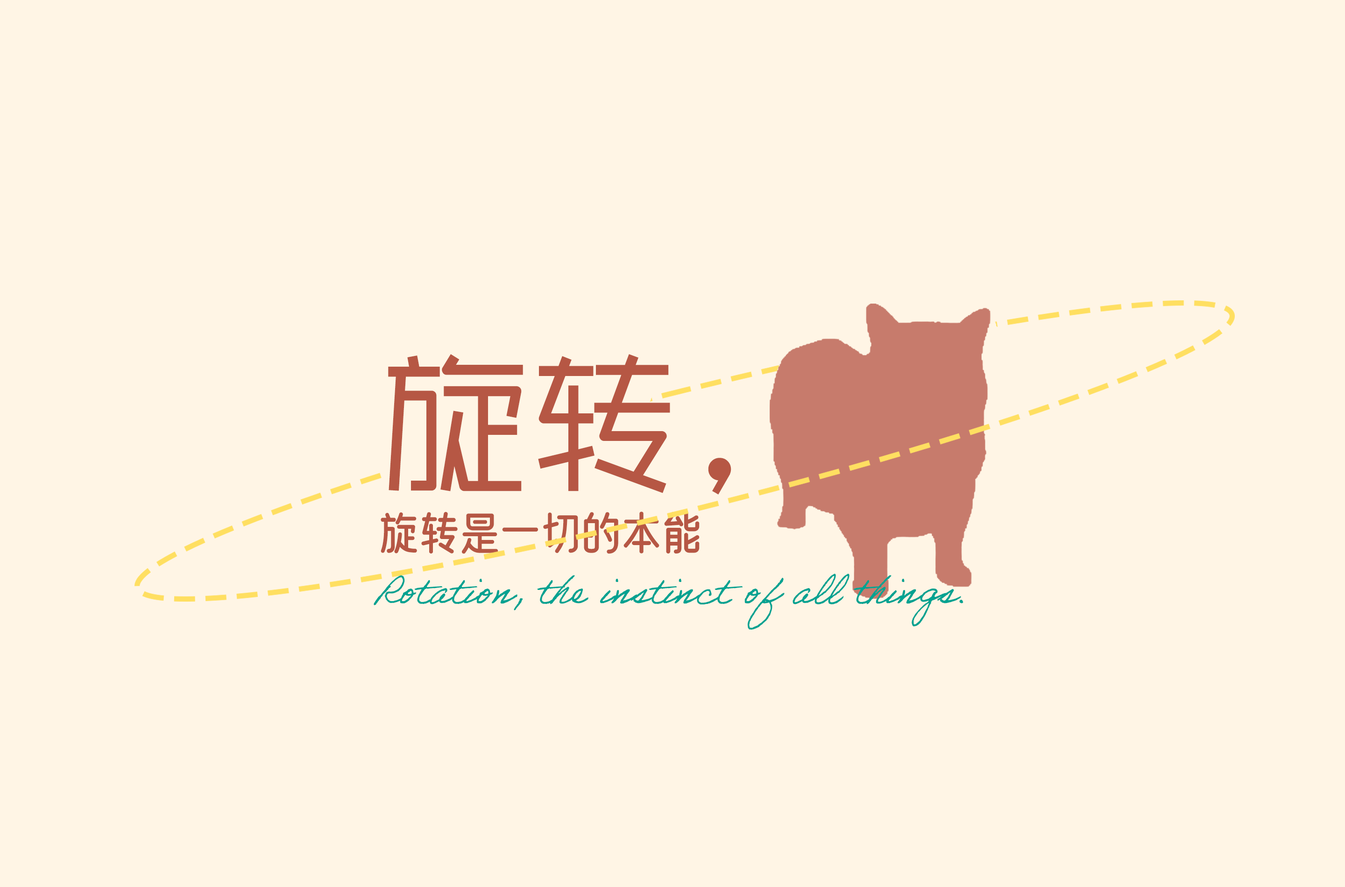
<style>
.page{position:relative;width:1345px;height:887px;background:#fff5e5}
.page>*{position:absolute;margin:0}
.t1{font:150.2px "PangMenZhengDao-XiXian";color:#b65744}
.t2{font:44.5px "YouSheShaYuFeiTeJianKangTi";color:#b65744}
.t3{font:39.1px "AdobeHandwriting-Ernie";color:#00a291}
</style>
<div class="page">
<p class="t1" style="left:388px;top:354px;width:343px;height:140px">旋转，</p>
<p class="t2" style="left:381px;top:511px;width:318px;height:43px">旋转是一切的本能</p>
<p class="t3" style="left:374px;top:573px;width:589px;height:56px">Rotation, the instinct of all things.</p>
</div>
